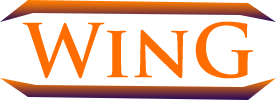
<style>
.page{position:relative;width:276px;height:100px;background:#ffffff}
.page>*{position:absolute;margin:0}
.t1{font:72px "TrajanPro-Bold";color:#ff6c00}
</style>
<div class="page">
<p class="t1" style="left:22px;top:21px;width:232px;height:58px">WinG</p>
</div>
